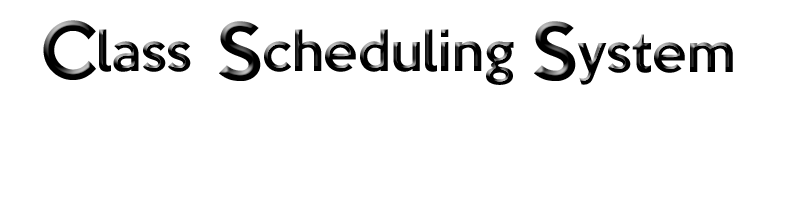
<style>
.page{position:relative;width:800px;height:200px;background:#ffffff}
.page>*{position:absolute;margin:0}
.t1{font:72px "KeepCalm-Medium";color:#000000;scale:0.96 1}
.t2{font:50px "KeepCalm-Medium";color:#000000}
.t3{font:72px "KeepCalm-Medium";color:#000000}
</style>
<div class="page">
<p class="t1" style="left:43px;top:20px;width:53px;height:60px">C</p>
<p class="t2" style="left:99px;top:29px;width:92px;height:43px">lass</p>
<p class="t3" style="left:219px;top:21px;width:42px;height:60px">S</p>
<p class="t2" style="left:264px;top:29px;width:250px;height:56px">cheduling</p>
<p class="t3" style="left:534px;top:21px;width:42px;height:60px">S</p>
<p class="t2" style="left:577px;top:34px;width:156px;height:51px">ystem</p>
</div>
